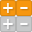
<style>
.page{position:relative;width:32px;height:32px;background:#f7970f}
.page>*{position:absolute;margin:0}
.t1{font:18px "LucidaConsole";color:#ffffff}
</style>
<div class="page">
<p class="t1" style="left:3px;top:3px;width:10px;height:10px">+</p>
<p class="t1" style="left:20px;top:7px;width:8px;height:2px">-</p>
<p class="t1" style="left:3px;top:19px;width:10px;height:10px">+</p>
<p class="t1" style="left:20px;top:23px;width:8px;height:2px">-</p>
</div>
